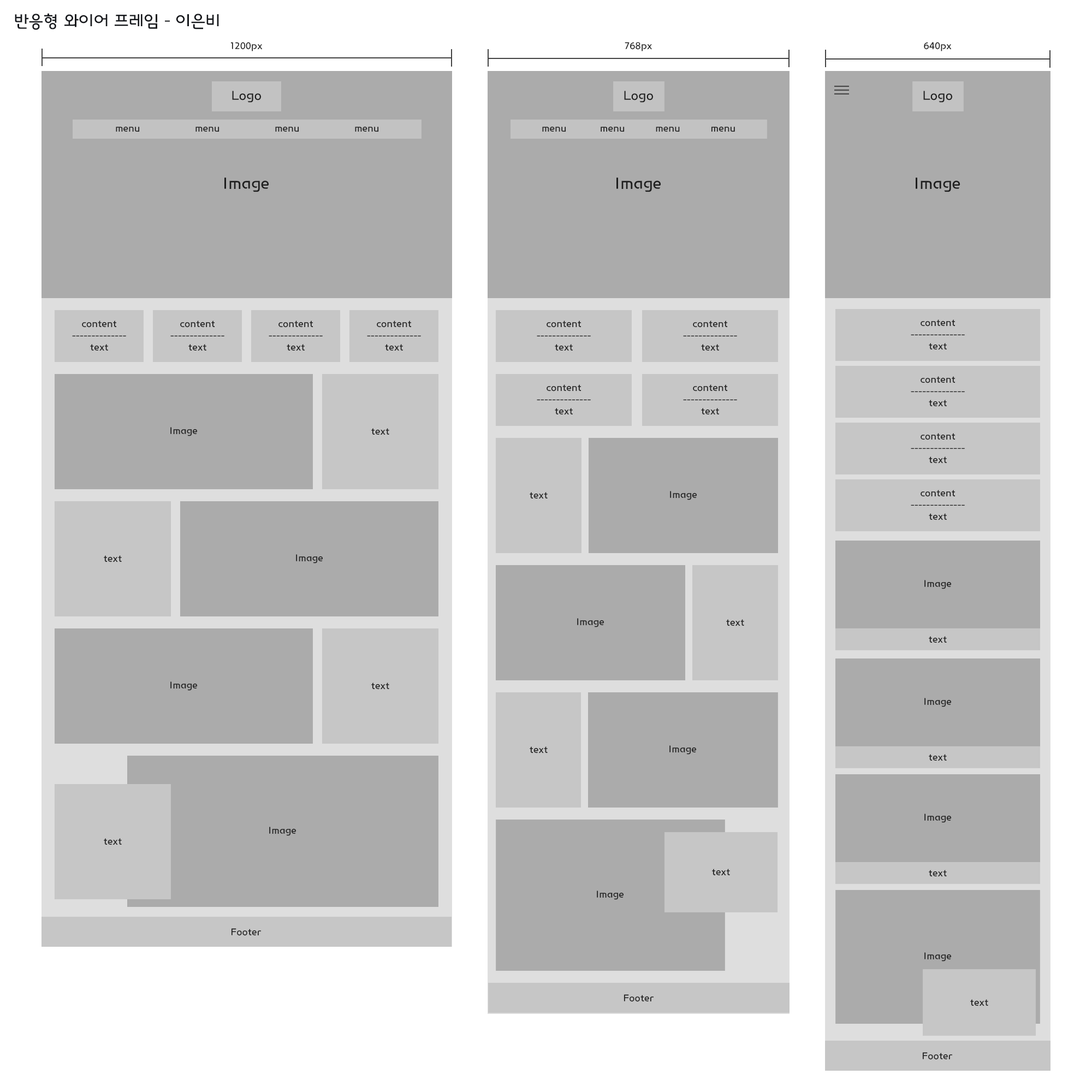
<style>
.page{position:relative;width:1092px;height:1092px;background:#ababab}
.page>*{position:absolute;margin:0}
.t1{font:16.4px "InterGTM";color:#16181c}
.t2{font:9.8px "InterGTM";color:#1e1e1e}
.t3{font:13.1px "InterGTM";color:#1e1e1e}
.t4{font:16.4px "InterGTM";color:#1e1e1e}
</style>
<div class="page">
<p class="t1" style="left:15px;top:13px;width:204px;height:17px">반응형 와이어 프레임 - 이은비</p>
<p class="t2" style="left:230px;top:42px;width:33px;height:9px">1200px</p>
<p class="t2" style="left:625px;top:42px;width:27px;height:9px">768px</p>
<p class="t2" style="left:924px;top:42px;width:28px;height:9px">640px</p>
<p class="t3" style="left:232px;top:91px;width:29px;height:12px">Logo</p>
<p class="t3" style="left:624px;top:91px;width:29px;height:12px">Logo</p>
<p class="t3" style="left:923px;top:91px;width:29px;height:12px">Logo</p>
<p class="t2" style="left:116px;top:126px;width:263px;height:6px">menu                  menu                  menu                  menu</p>
<p class="t2" style="left:542px;top:126px;width:193px;height:6px">menu           menu          menu          menu</p>
<p class="t4" style="left:224px;top:177px;width:45px;height:15px">Image</p>
<p class="t4" style="left:616px;top:177px;width:45px;height:15px">Image</p>
<p class="t4" style="left:916px;top:177px;width:44px;height:15px">Image</p>
<p class="t2" style="left:72px;top:320px;width:54px;height:31px;text-align:center">content<br>--------------<br>text</p>
<p class="t2" style="left:170px;top:320px;width:54px;height:31px;text-align:center">content<br>--------------<br>text</p>
<p class="t2" style="left:269px;top:320px;width:54px;height:31px;text-align:center">content<br>--------------<br>text</p>
<p class="t2" style="left:367px;top:320px;width:54px;height:31px;text-align:center">content<br>--------------<br>text</p>
<p class="t2" style="left:537px;top:320px;width:54px;height:31px;text-align:center">content<br>--------------<br>text</p>
<p class="t2" style="left:683px;top:320px;width:54px;height:31px;text-align:center">content<br>--------------<br>text</p>
<p class="t2" style="left:911px;top:319px;width:54px;height:31px;text-align:center">content<br>--------------<br>text</p>
<p class="t2" style="left:911px;top:376px;width:54px;height:31px;text-align:center">content<br>--------------<br>text</p>
<p class="t2" style="left:537px;top:384px;width:54px;height:31px;text-align:center">content<br>--------------<br>text</p>
<p class="t2" style="left:683px;top:384px;width:54px;height:31px;text-align:center">content<br>--------------<br>text</p>
<p class="t2" style="left:170px;top:427px;width:28px;height:9px">Image</p>
<p class="t2" style="left:371px;top:428px;width:18px;height:7px">text</p>
<p class="t2" style="left:911px;top:433px;width:54px;height:31px;text-align:center">content<br>--------------<br>text</p>
<p class="t2" style="left:530px;top:492px;width:18px;height:7px">text</p>
<p class="t2" style="left:670px;top:491px;width:27px;height:9px">Image</p>
<p class="t2" style="left:911px;top:490px;width:54px;height:30px;text-align:center">content<br>--------------<br>text</p>
<p class="t2" style="left:104px;top:555px;width:18px;height:7px">text</p>
<p class="t2" style="left:296px;top:554px;width:27px;height:9px">Image</p>
<p class="t2" style="left:924px;top:580px;width:28px;height:9px">Image</p>
<p class="t2" style="left:577px;top:618px;width:27px;height:9px">Image</p>
<p class="t2" style="left:726px;top:619px;width:18px;height:7px">text</p>
<p class="t2" style="left:929px;top:636px;width:18px;height:7px">text</p>
<p class="t2" style="left:170px;top:681px;width:28px;height:10px">Image</p>
<p class="t2" style="left:371px;top:682px;width:18px;height:8px">text</p>
<p class="t2" style="left:924px;top:698px;width:28px;height:9px">Image</p>
<p class="t2" style="left:530px;top:746px;width:18px;height:7px">text</p>
<p class="t2" style="left:669px;top:745px;width:28px;height:10px">Image</p>
<p class="t2" style="left:929px;top:754px;width:18px;height:7px">text</p>
<p class="t2" style="left:924px;top:814px;width:28px;height:9px">Image</p>
<p class="t2" style="left:269px;top:827px;width:27px;height:9px">Image</p>
<p class="t2" style="left:104px;top:838px;width:18px;height:7px">text</p>
<p class="t2" style="left:712px;top:869px;width:18px;height:7px">text</p>
<p class="t2" style="left:929px;top:870px;width:18px;height:7px">text</p>
<p class="t2" style="left:597px;top:891px;width:27px;height:9px">Image</p>
<p class="t2" style="left:231px;top:928px;width:30px;height:8px">Footer</p>
<p class="t2" style="left:924px;top:952px;width:28px;height:9px">Image</p>
<p class="t2" style="left:624px;top:994px;width:30px;height:8px">Footer</p>
<p class="t2" style="left:970px;top:999px;width:18px;height:7px">text</p>
<p class="t2" style="left:922px;top:1052px;width:30px;height:8px">Footer</p>
</div>
